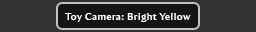
<style>
.page{position:relative;width:256px;height:32px;background:#333333}
.page>*{position:absolute;margin:0}
.t1{font:10px "AmiraParadiso";letter-spacing:0.05em;color:#ffffff}
</style>
<div class="page">
<p class="t1" style="left:65px;top:13px;width:126px;height:9px">Toy Camera: Bright Yellow</p>
</div>
